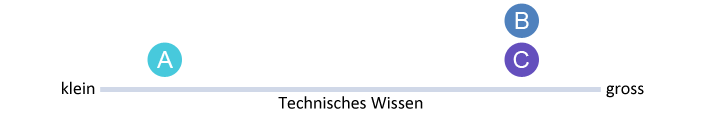
<style>
.page{position:relative;width:717px;height:120px;background:#ffffff}
.page>*{position:absolute;margin:0}
.t1{font:24px "ArialMT";color:#ffffff}
.t2{font:18px "Calibri";color:#000000}
</style>
<div class="page">
<p class="t1" style="left:515px;top:12px;width:14px;height:17px">B</p>
<p class="t1" style="left:157px;top:51px;width:16px;height:17px">A</p>
<p class="t1" style="left:513px;top:51px;width:16px;height:17px">C</p>
<p class="t2" style="left:62px;top:81px;width:33px;height:14px">klein</p>
<p class="t2" style="left:606px;top:85px;width:38px;height:13px">gross</p>
<p class="t2" style="left:278px;top:96px;width:145px;height:13px">Technisches Wissen</p>
</div>
